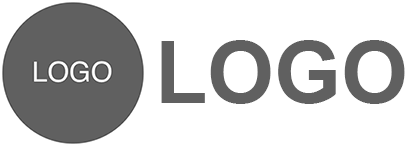
<style>
.page{position:relative;width:409px;height:146px;background:#ffffff}
.page>*{position:absolute;margin:0}
.t1{font:86px "Arial-BoldMT";color:#606060}
</style>
<div class="page">
<p class="t1" style="left:161px;top:40px;width:244px;height:64px">LOGO</p>
</div>
